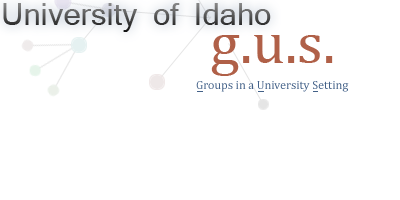
<style>
.page{position:relative;width:400px;height:200px;background:#ffffff}
.page>*{position:absolute;margin:0}
.t1{font:30px "Mangal"}
.t2{font:60px "Cambria";color:#b06048}
.t3{font:12px "Cambria";color:#436188}
</style>
<div class="page">
<p class="t1" style="left:3px;top:3px;width:268px;height:29px">University of Idaho</p>
<p class="t2" style="left:211px;top:35px;width:122px;height:41px">g.u.s.</p>
<p class="t3" style="left:196px;top:81px;width:153px;height:11px">Groups in a University Setting</p>
</div>
